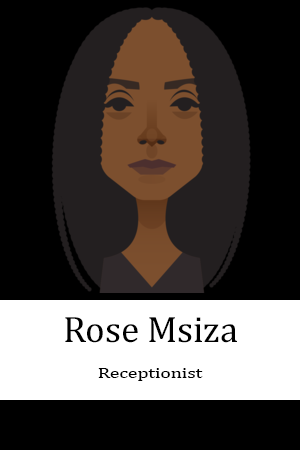
<style>
.page{position:relative;width:300px;height:450px;background:#000000}
.page>*{position:absolute;margin:0}
.t1{font:37.3px "Cambria";color:#000000}
.t2{font:15.2px "Cambria";color:#000000;scale:1.29 1}
</style>
<div class="page">
<p class="t1" style="left:65px;top:317px;width:172px;height:26px">Rose Msiza</p>
<p class="t2" style="left:98px;top:368px;width:105px;height:13px">Receptionist</p>
</div>
